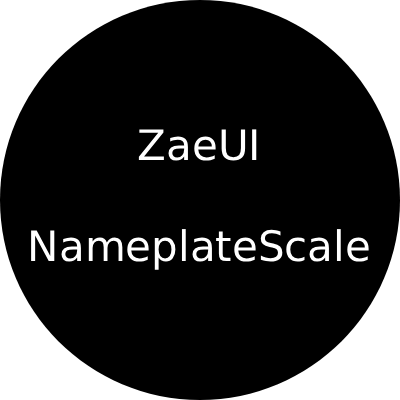
<style>
.page{position:relative;width:400px;height:400px;background:#000000}
.page>*{position:absolute;margin:0}
.t1{font:42px "DejaVuSans";color:#ffffff}
</style>
<div class="page">
<p class="t1" style="left:31px;top:129px;width:338px;height:141px;text-align:center">ZaeUI<br><br>NameplateScale</p>
</div>
